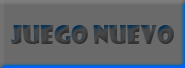
<style>
.page{position:relative;width:185px;height:68px;background:#6a6a6b}
.page>*{position:absolute;margin:0}
.t1{font:25px "ShowcardGothic-Reg";color:#494949}
</style>
<div class="page">
<p class="t1" style="left:11px;top:25px;width:163px;height:19px">Juego Nuevo</p>
</div>
